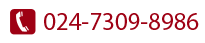
<style>
.page{position:relative;width:205px;height:43px;background:#ffffff}
.page>*{position:absolute;margin:0}
.t1{font:24.9px "MyriadPro-Regular";color:#9e0114}
</style>
<div class="page">
<p class="t1" style="left:44px;top:13px;width:155px;height:17px">024-7309-8986</p>
</div>
